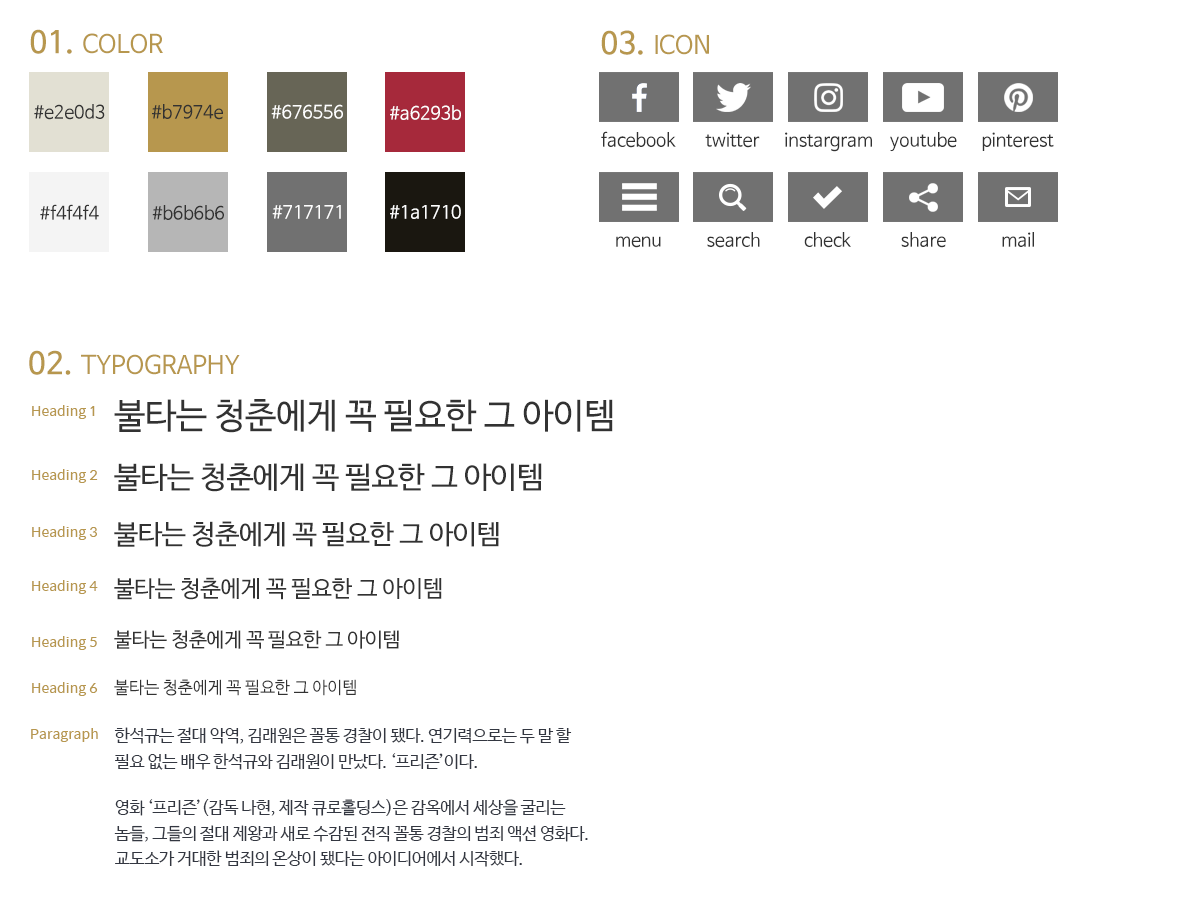
<style>
.page{position:relative;width:1200px;height:900px;background:#ffffff}
.page>*{position:absolute;margin:0}
.t1{font:25px "NanumBarunGothic";letter-spacing:-0.01em;color:#b7974e}
.t2{font:30px "NanumBarunGothic";letter-spacing:-0.01em;color:#b7974e;font-weight:bold}
.t3{font:18px "NanumBarunGothic";letter-spacing:-0.01em;color:#323232}
.t4{font:18px "NanumBarunGothic";letter-spacing:-0.01em;color:#ffffff}
.t5{font:35px "NanumBarunGothic";letter-spacing:-0.01em;color:#323232}
.t6{font:14px "SpoqaHanSans-Regular";color:#b7974e}
.t7{font:30px "NanumBarunGothic";letter-spacing:-0.01em;color:#323232}
.t8{font:27px "NanumBarunGothic";letter-spacing:-0.01em;color:#323232}
.t9{font:23px "NanumBarunGothic";letter-spacing:-0.01em;color:#323232}
.t10{font:20px "NanumBarunGothic";letter-spacing:-0.01em;color:#323232}
.t11{font:17px "NanumBarunGothic";letter-spacing:-0.01em;color:#323232}
.t12{font:17px "NanumBarunGothic";letter-spacing:-0.025em;color:#333741}
</style>
<div class="page">
<p class="t1" style="left:30px;top:29px;width:133px;height:25px"><span class="t2">01. </span>COLOR</p>
<p class="t1" style="left:601px;top:30px;width:108px;height:25px"><span class="t2">03. </span>ICON</p>
<p class="t3" style="left:34px;top:104px;width:71px;height:16px">#e2e0d3</p>
<p class="t3" style="left:152px;top:104px;width:71px;height:16px">#b7974e</p>
<p class="t4" style="left:271px;top:104px;width:72px;height:15px">#676556</p>
<p class="t4" style="left:390px;top:105px;width:71px;height:15px">#a6293b</p>
<p class="t3" style="left:601px;top:131px;width:75px;height:17px">facebook</p>
<p class="t3" style="left:705px;top:132px;width:55px;height:16px">twitter</p>
<p class="t3" style="left:785px;top:132px;width:87px;height:20px">instargram</p>
<p class="t3" style="left:890px;top:132px;width:67px;height:20px">youtube</p>
<p class="t3" style="left:982px;top:132px;width:72px;height:19px">pinterest</p>
<p class="t3" style="left:40px;top:204px;width:59px;height:16px">#f4f4f4</p>
<p class="t3" style="left:152px;top:205px;width:72px;height:15px">#b6b6b6</p>
<p class="t4" style="left:272px;top:205px;width:69px;height:14px">#717171</p>
<p class="t4" style="left:390px;top:204px;width:71px;height:15px">#1a1710</p>
<p class="t3" style="left:707px;top:232px;width:53px;height:16px">search</p>
<p class="t3" style="left:804px;top:232px;width:47px;height:16px">check</p>
<p class="t3" style="left:901px;top:232px;width:45px;height:16px">share</p>
<p class="t3" style="left:1002px;top:232px;width:32px;height:15px">mail</p>
<p class="t3" style="left:616px;top:236px;width:45px;height:12px">menu</p>
<p class="t1" style="left:29px;top:350px;width:211px;height:25px"><span class="t2">02. </span>TYPOGRAPHY</p>
<p class="t5" style="left:114px;top:399px;width:499px;height:34px">불타는 청춘에게 꼭 필요한 그 아이템</p>
<p class="t6" style="left:32px;top:405px;width:63px;height:14px">Heading 1</p>
<p class="t6" style="left:32px;top:469px;width:66px;height:14px">Heading 2</p>
<p class="t7" style="left:114px;top:463px;width:428px;height:29px">불타는 청춘에게 꼭 필요한 그 아이템</p>
<p class="t8" style="left:114px;top:521px;width:385px;height:26px">불타는 청춘에게 꼭 필요한 그 아이템</p>
<p class="t6" style="left:32px;top:526px;width:65px;height:14px">Heading 3</p>
<p class="t6" style="left:32px;top:580px;width:66px;height:14px">Heading 4</p>
<p class="t9" style="left:114px;top:577px;width:328px;height:23px">불타는 청춘에게 꼭 필요한 그 아이템</p>
<p class="t10" style="left:114px;top:630px;width:285px;height:19px">불타는 청춘에게 꼭 필요한 그 아이템</p>
<p class="t6" style="left:32px;top:636px;width:65px;height:14px">Heading 5</p>
<p class="t6" style="left:32px;top:682px;width:66px;height:14px">Heading 6</p>
<p class="t11" style="left:114px;top:679px;width:242px;height:17px">불타는 청춘에게 꼭 필요한 그 아이템</p>
<p class="t6" style="left:31px;top:728px;width:67px;height:14px">Paragraph</p>
<p class="t12" style="left:114px;top:727px;width:474px;height:140px">한석규는 절대 악역, 김래원은 꼴통 경찰이 됐다. 연기력으로는 두 말 할 필요 없는 배우 한석규와 김래원이 만났다. ‘프리즌’이다.<br>영화 ‘프리즌’(감독 나현, 제작 큐로홀딩스)은 감옥에서 세상을 굴리는 놈들, 그들의 절대 제왕과 새로 수감된 전직 꼴통 경찰의 범죄 액션 영화다. 교도소가 거대한 범죄의 온상이 됐다는 아이디어에서 시작했다.</p>
</div>
